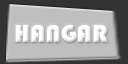
<style>
.page{position:relative;width:128px;height:64px;background:#bfbfbf}
.page>*{position:absolute;margin:0}
.t1{font:26px "Bauhaus93";color:#ffffff}
</style>
<div class="page">
<p class="t1" style="left:15px;top:25px;width:93px;height:17px">HANGAR</p>
</div>
